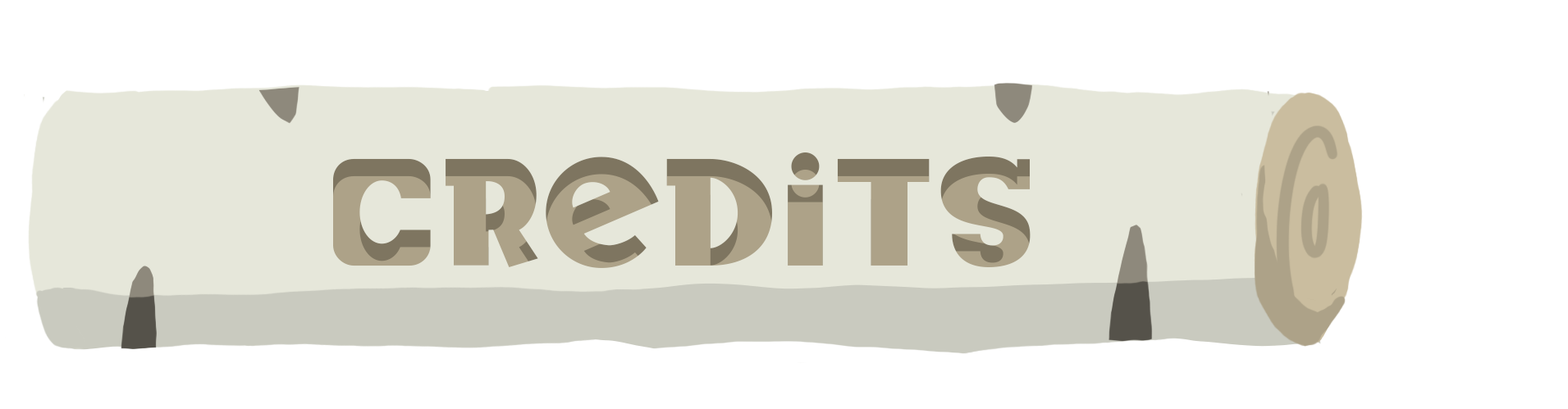
<style>
.page{position:relative;width:1568px;height:409px;background:#ffffff}
.page>*{position:absolute;margin:0}
.t1{font:148px "BadTyp-Regular";color:#ada288}
</style>
<div class="page">
<p class="t1" style="left:333px;top:153px;width:698px;height:115px">Credits</p>
</div>
